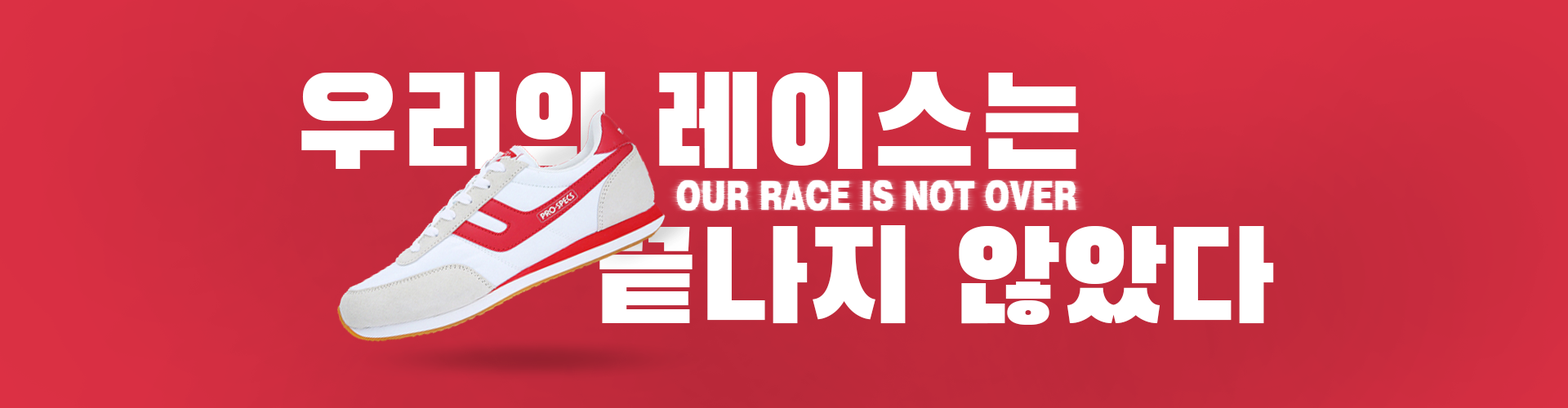
<style>
.page{position:relative;width:1568px;height:408px}
.page>*{position:absolute;margin:0}
.t1{font:128.5px "BlackHanSans-Regular";color:#ffffff}
</style>
<div class="page">
<p class="t1" style="left:301px;top:72px;width:778px;height:97px">우리의 레이스는</p>
<p class="t1" style="left:599px;top:225px;width:675px;height:100px">끝나지 않았다</p>
</div>
